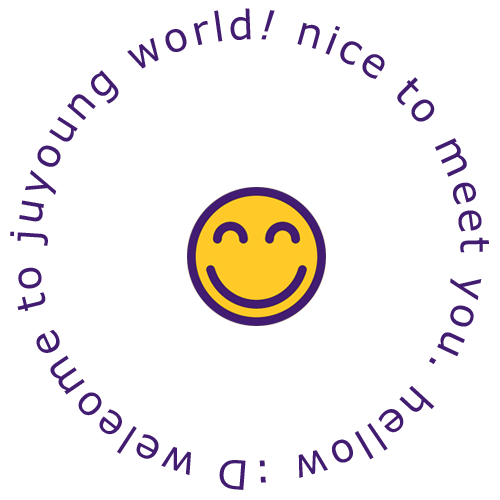
<style>
.page{position:relative;width:500px;height:500px;background:#ffffff}
.page>*{position:absolute;margin:0}
.t1{font:40.5px "Verdana";letter-spacing:0.08em;color:#421c70}
.t2{font:40.5px "Verdana-Italic";letter-spacing:0.08em;color:#421c70}
</style>
<div class="page">
<p class="t1" style="left:10px;top:8px;width:479px;height:482px;text-align:center">hellow :D weleome to juyoung world<span class="t2">!</span> nice to meet you.</p>
</div>
